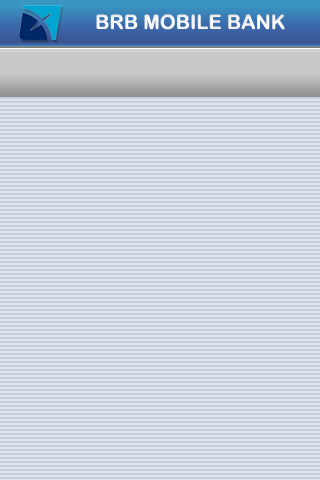
<style>
.page{position:relative;width:320px;height:480px;background:#dce5f0}
.page>*{position:absolute;margin:0}
.t1{font:20px "ArialRoundedMTBold";color:#ffffff;text-transform:uppercase}
</style>
<div class="page">
<p class="t1" style="left:96px;top:14px;width:189px;height:16px">brb mobile bank</p>
</div>
